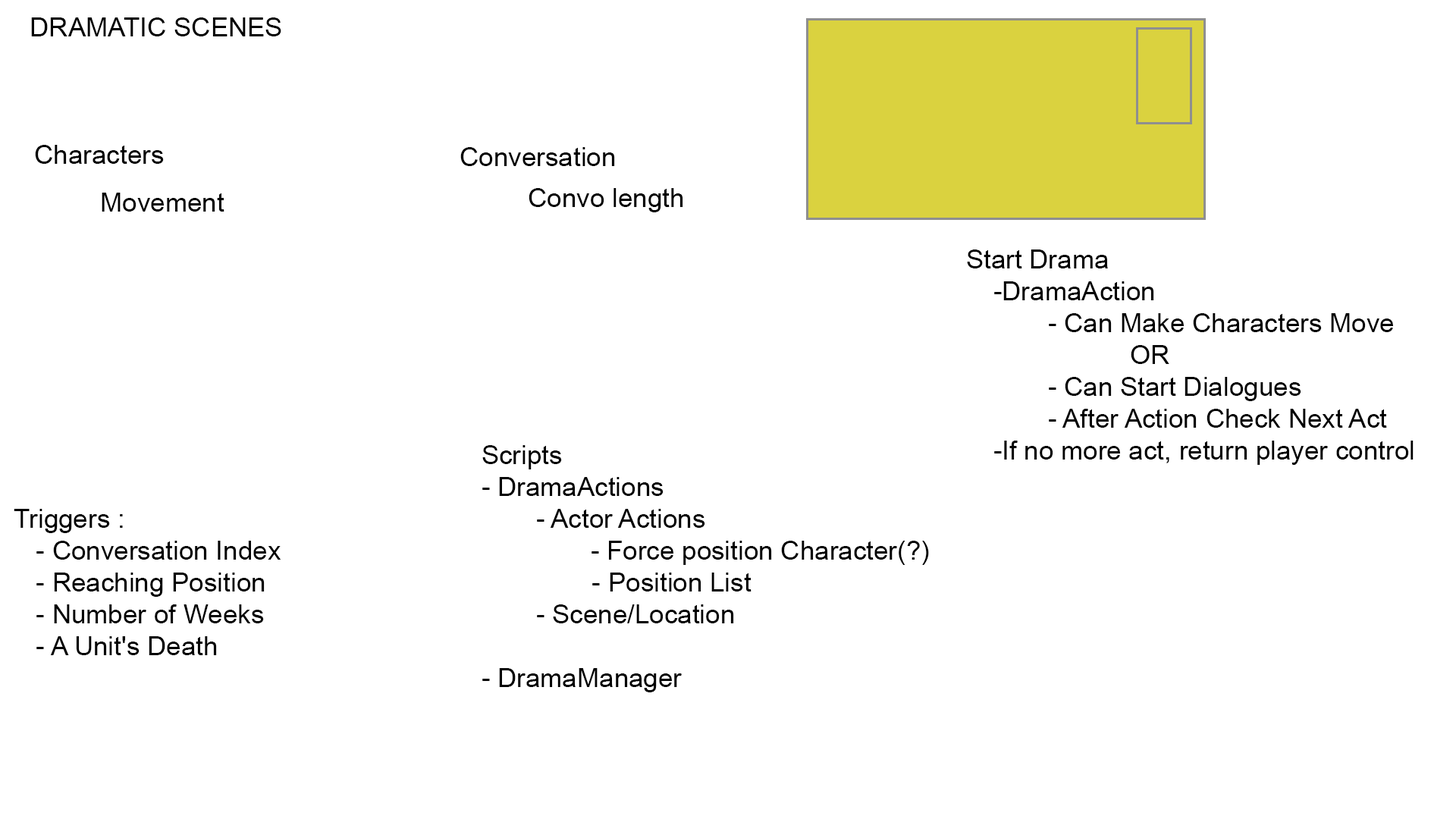
<style>
.page{position:relative;width:1456px;height:819px;background:#ffffff}
.page>*{position:absolute;margin:0}
.t1{font:26.5px "ArialMT";color:#000000}
</style>
<div class="page">
<p class="t1" style="left:31px;top:17px;width:250px;height:19px">DRAMATIC SCENES</p>
<p class="t1" style="left:35px;top:145px;width:129px;height:19px">Characters</p>
<p class="t1" style="left:460px;top:147px;width:155px;height:19px">Conversation</p>
<p class="t1" style="left:102px;top:193px;width:122px;height:19px">Movement</p>
<p class="t1" style="left:529px;top:188px;width:154px;height:24px">Convo length</p>
<p class="t1" style="left:967px;top:249px;width:447px;height:216px;text-align:right">Start Drama<br> -DramaAction<br>   - Can Make Characters Move<br>      OR<br>   - Can Start Dialogues<br>   - After Action Check Next Act<br> -If no more act, return player control</p>
<p class="t1" style="left:482px;top:445px;width:447px;height:247px;text-align:right">Scripts<br>- DramaActions<br>  - Actor Actions<br>    - Force position Character(?)<br>               - Position List<br>  - Scene/Location<br>  <br>- DramaManager</p>
<p class="t1" style="left:14px;top:509px;width:267px;height:146px;text-align:right">Triggers :<br>   - Conversation Index<br>   - Reaching Position<br>   - Number of Weeks<br>   - A Unit's Death</p>
</div>
